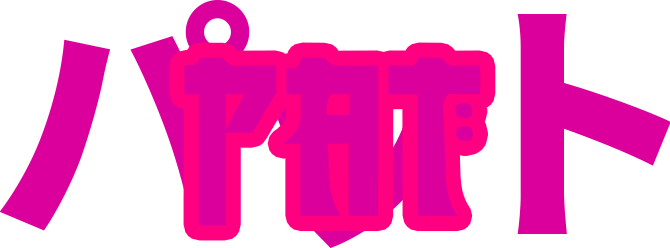
<style>
.page{position:relative;width:670px;height:248px;background:#ffffff}
.page>*{position:absolute;margin:0}
.t1{font:258.3px "SourceHanSansJP-Heavy";color:#db009b}
.t2{font:208.3px "Manga-Bold";color:#db009b}
</style>
<div class="page">
<p class="t1" style="left:0px;top:0px;width:671px;height:248px">パット</p>
<p class="t2" style="left:184px;top:57px;width:297px;height:169px">PAT</p>
</div>
